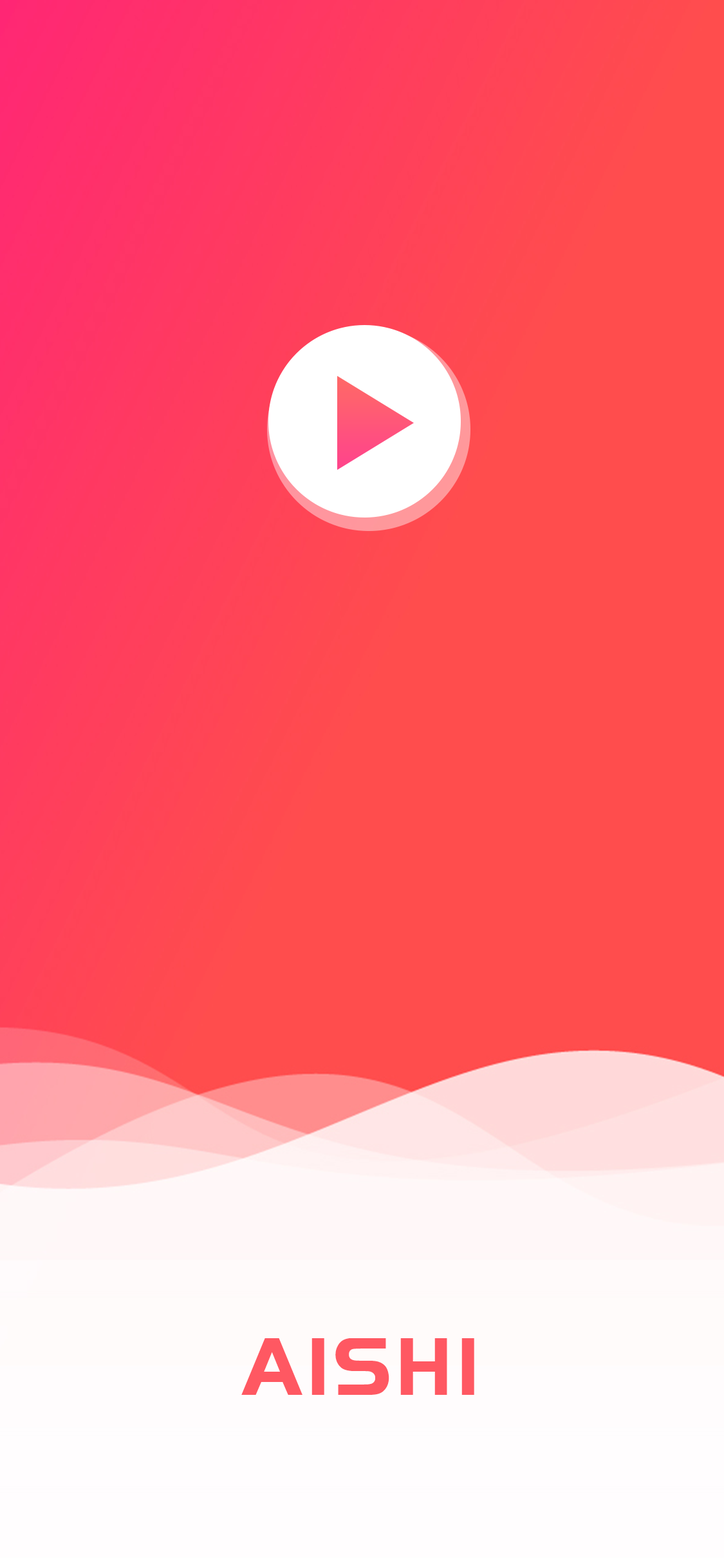
<style>
.page{position:relative;width:724px;height:1568px;background:#ff4d4d}
.page>*{position:absolute;margin:0}
.t1{font:85px "PangMenZhengDao";letter-spacing:0.04em;color:#ff5862}
</style>
<div class="page">
<p class="t1" style="left:241px;top:1338px;width:233px;height:57px">AISHI</p>
</div>
